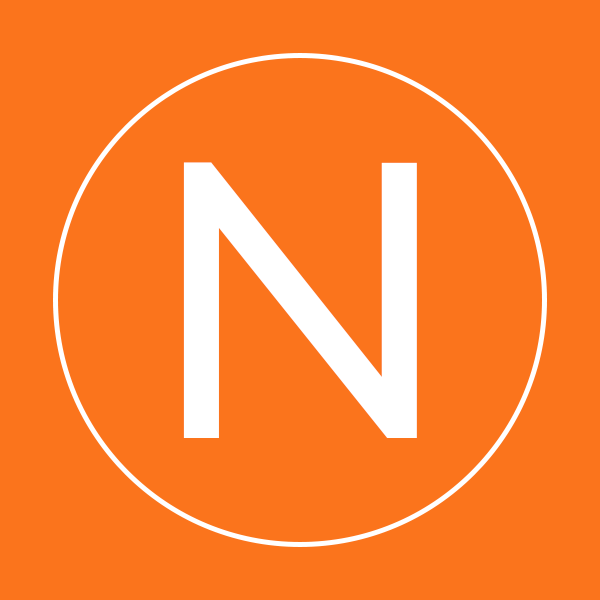
<style>
.page{position:relative;width:600px;height:600px;background:#fb741c}
.page>*{position:absolute;margin:0}
.t1{font:387.8px "Raleway-Medium";color:#ffffff}
</style>
<div class="page">
<p class="t1" style="left:183px;top:162px;width:234px;height:276px">N</p>
</div>
